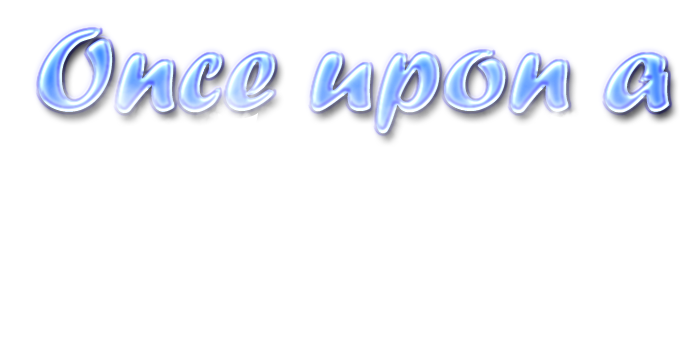
<style>
.page{position:relative;width:700px;height:350px;background:#ffffff}
.page>*{position:absolute;margin:0}
.t1{font:122.7px "ForteMT"}
</style>
<div class="page">
<p class="t1" style="left:38px;top:28px;width:632px;height:106px">Once upon a</p>
</div>
